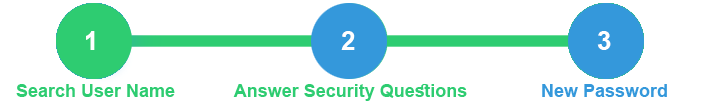
<style>
.page{position:relative;width:701px;height:104px;background:#ffffff}
.page>*{position:absolute;margin:0}
.t1{font:26px "Arial-BoldMT";color:#ffffff}
.t2{font:18px "Arial-BoldMT";color:#2ecc71}
.t3{font:18px "Arial-BoldMT";color:#3498db}
</style>
<div class="page">
<p class="t1" style="left:86px;top:31px;width:9px;height:19px">1</p>
<p class="t1" style="left:341px;top:31px;width:14px;height:19px">2</p>
<p class="t1" style="left:597px;top:31px;width:14px;height:19px">3</p>
<p class="t2" style="left:16px;top:84px;width:159px;height:13px">Search User Name</p>
<p class="t2" style="left:233px;top:84px;width:234px;height:17px">Answer Security Questions</p>
<p class="t3" style="left:542px;top:84px;width:125px;height:13px">New Password</p>
</div>
